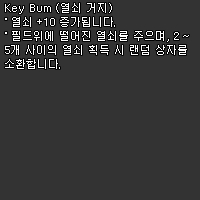
<style>
.page{position:relative;width:200px;height:200px;background:#333333}
.page>*{position:absolute;margin:0}
.t1{font:11px/14px "Dotum";color:#ffffff}
</style>
<div class="page">
<p class="t1" style="left:5px;top:3px;width:184px;height:66px">Key Bum (열쇠 거지)<br>˚ 열쇠 +10 증가됩니다.<br>˚ 필드위에 떨어진 열쇠를 주으며, 2 ~<br>5개 사이의 열쇠 획득 시 랜덤 상자를<br>소환합니다.</p>
</div>
